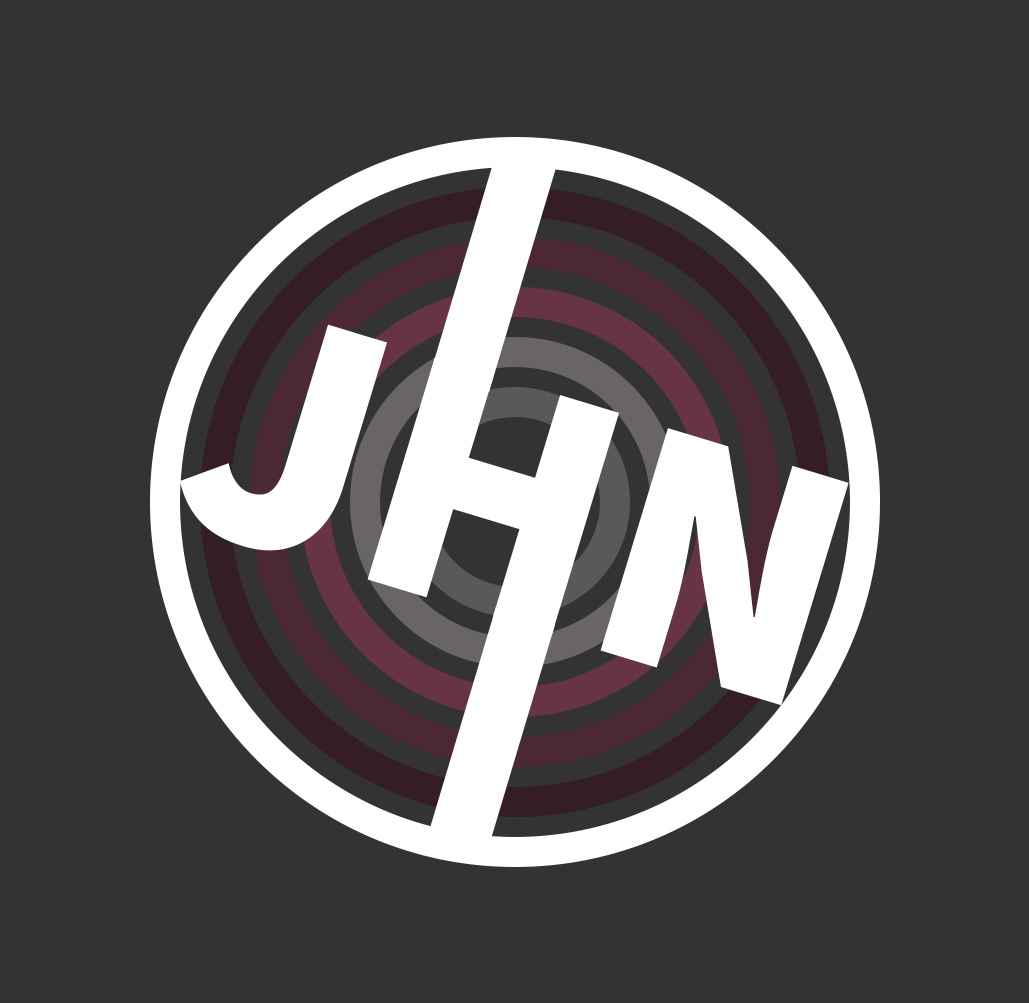
<style>
.page{position:relative;width:1029px;height:1003px;background:#333333}
.page>*{position:absolute;margin:0}
.t1{font:357.3px "SourceSansPro-Black";color:#ffffff}
</style>
<div class="page">
<p class="t1" style="left:179px;top:324px;width:670px;height:382px;rotate:17deg">JHN</p>
</div>
